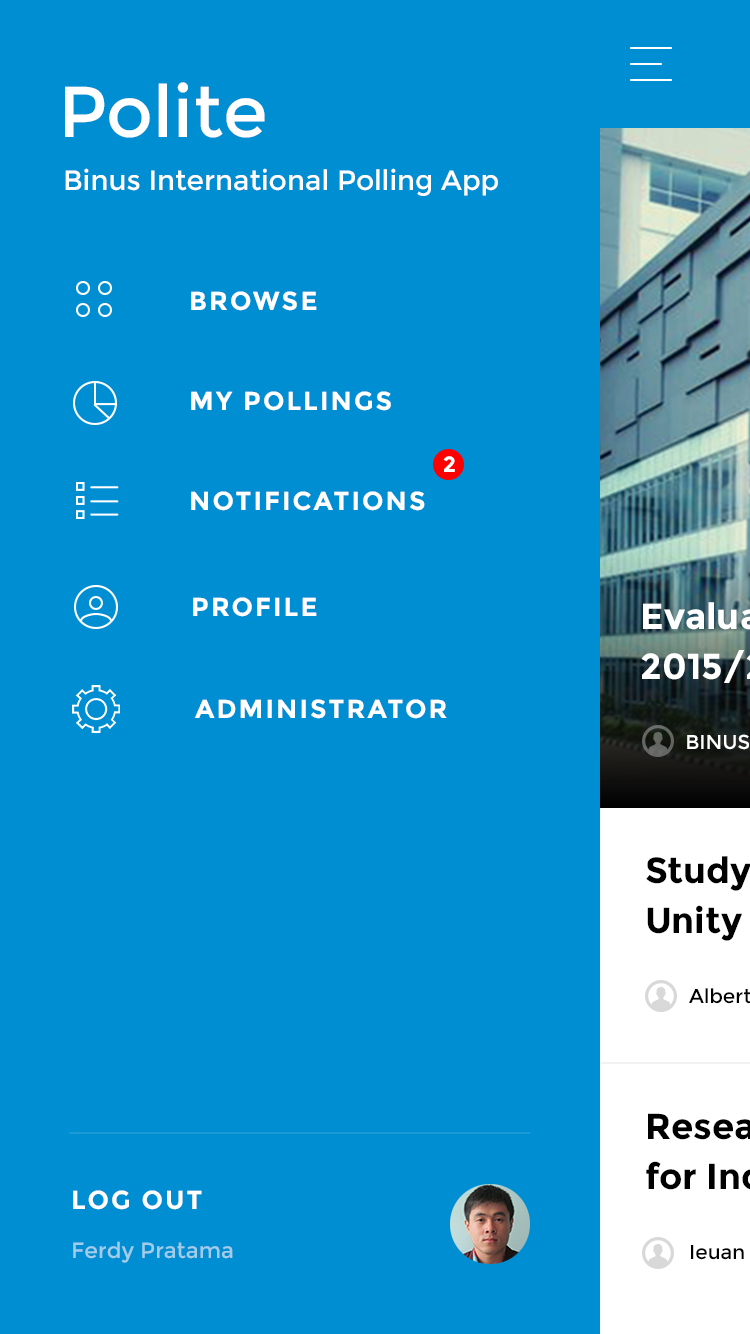
<style>
.page{position:relative;width:750px;height:1334px;background:#008ed3}
.page>*{position:absolute;margin:0}
.t1{font:72px "Montserrat-Regular";color:#ffffff}
.t2{font:28px "Montserrat-Regular";color:#ffffff}
.t3{font:26px "Montserrat-Bold";letter-spacing:0.08em;color:#ffffff}
.t4{font:22px "Montserrat-Bold";letter-spacing:0.05em;color:#ffffff}
.t5{font:22px "Montserrat-Regular";color:#a3ccea}
</style>
<div class="page">
<p class="t1" style="left:65px;top:82px;width:200px;height:56px">Polite</p>
<p class="t2" style="left:65px;top:168px;width:433px;height:28px">Binus International Polling App</p>
<p class="t3" style="left:191px;top:291px;width:126px;height:20px">BROWSE</p>
<p class="t3" style="left:191px;top:391px;width:200px;height:20px">MY POLLINGS</p>
<p class="t4" style="left:443px;top:456px;width:12px;height:16px">2</p>
<p class="t3" style="left:191px;top:491px;width:234px;height:20px">NOTIFICATIONS</p>
<p class="t3" style="left:193px;top:597px;width:124px;height:20px">PROFILE</p>
<p class="t3" style="left:194px;top:699px;width:253px;height:20px">ADMINISTRATOR</p>
<p class="t3" style="left:73px;top:1190px;width:129px;height:20px">LOG OUT</p>
<p class="t5" style="left:73px;top:1241px;width:160px;height:22px">Ferdy Pratama</p>
</div>
